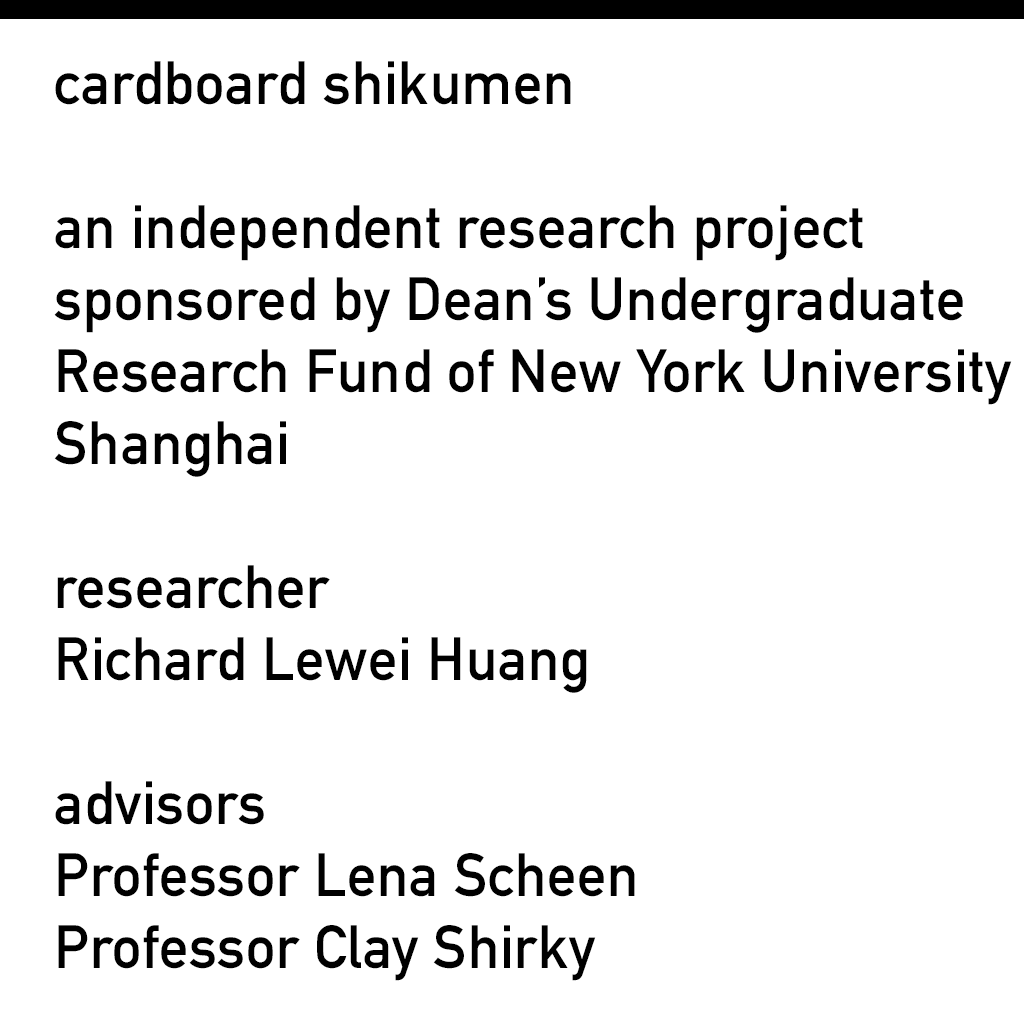
<style>
.page{position:relative;width:1024px;height:1024px;background:#ffffff}
.page>*{position:absolute;margin:0}
.t1{font:60px "DINAlternate-Bold";color:#000000}
</style>
<div class="page">
<p class="t1" style="left:54px;top:61px;width:958px;height:920px">cardboard shikumen<br><br>an independent research project<br>sponsored by Dean’s Undergraduate<br>Research Fund of New York University<br>Shanghai<br><br>researcher<br>Richard Lewei Huang<br><br>advisors<br>Professor Lena Scheen<br>Professor Clay Shirky</p>
</div>
